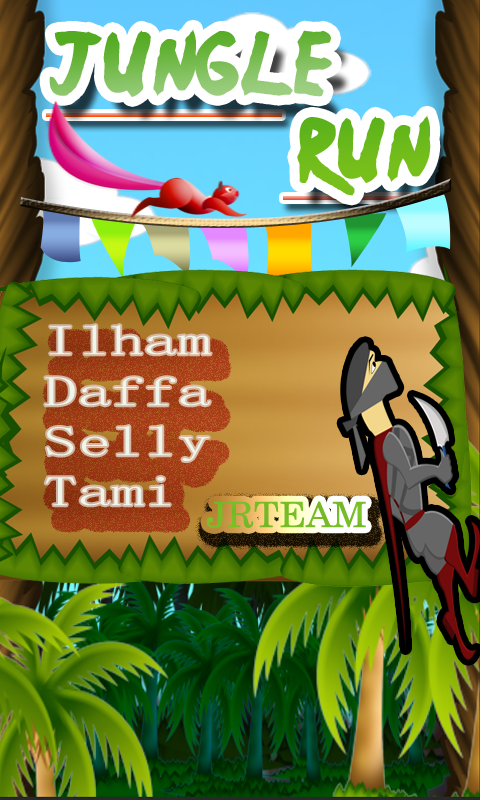
<style>
.page{position:relative;width:480px;height:800px}
.page>*{position:absolute;margin:0}
.t1{font:72px "Ninja-Naruto"}
.t2{font:41.8px "SimSun-ExtB";color:#eef5eb;scale:1.6 1}
.t3{font:34.9px "CenturySchlbkCyrillicBT-Roman";color:#78bd28;scale:1.07 1}
</style>
<div class="page">
<p class="t1" style="left:49px;top:29px;width:382px;height:167px">jungle<br>                  run</p>
<p class="t2" style="left:45px;top:325px;width:166px;height:181px">Ilham<br>Daffa<br>Selly<br>Tami</p>
<p class="t3" style="left:206px;top:501px;width:160px;height:27px">JRTEAM</p>
</div>
